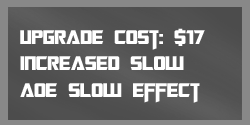
<style>
.page{position:relative;width:250px;height:125px}
.page>*{position:absolute;margin:0}
.t1{font:22px "TransformersMovie";color:#ffffff}
</style>
<div class="page">
<p class="t1" style="left:20px;top:28px;width:185px;height:75px">upgrade cost: $17<br>Increased slow<br>aoe slow effect</p>
</div>
